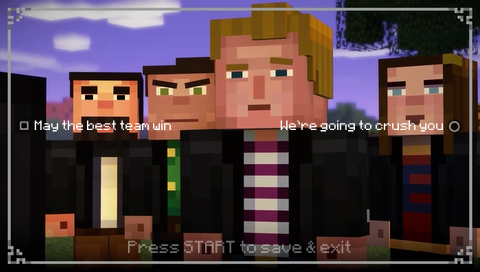
<style>
.page{position:relative;width:480px;height:272px}
.page>*{position:absolute;margin:0}
.t1{font:11px "Minecraft";color:#ffffff}
.t2{font:14px "Minecraft"}
</style>
<div class="page">
<p class="t1" style="left:34px;top:120px;width:137px;height:12px">May the best team win</p>
<p class="t1" style="left:280px;top:120px;width:163px;height:12px">We're going to crush you</p>
<p class="t2" style="left:128px;top:240px;width:223px;height:13px">Press START to save &amp; exit</p>
</div>
